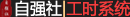
<style>
.page{position:relative;width:130px;height:17px;background:#1f1f1f}
.page>*{position:absolute;margin:0}
.t1{font:16px "MicrosoftYaHei";color:#f53d3d}
.t2{font:16px "MicrosoftYaHei";color:#ffffff}
.t3{font:16px "MicrosoftYaHei";color:#facd89}
</style>
<div class="page">
<p class="t1" style="left:15px;top:0px;width:116px;height:19px"><span class="t2">自强社</span><span class="t3">|</span>工时系统</p>
</div>
